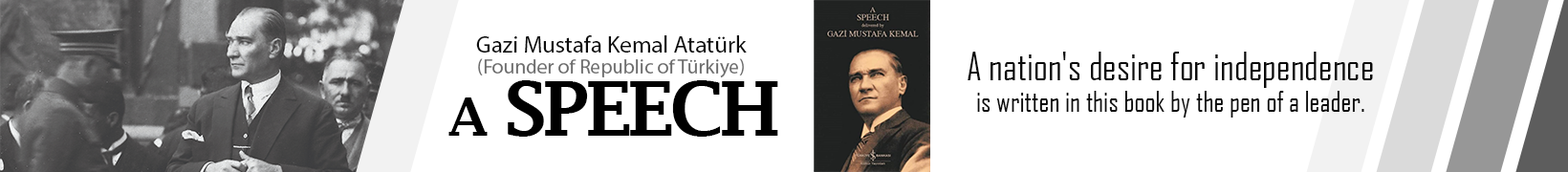
<style>
.page{position:relative;width:1568px;height:172px;background:#ffffff}
.page>*{position:absolute;margin:0}
.t1{font:20.2px/20.2px "MyriadPro-Regular";color:#6e6e6e}
.t2{font:23.6px/20.2px "MyriadPro-Regular";color:#0d0d0d}
.t3{font:27.8px/31.7px "AgencyFB-Reg";color:#0b0b0b}
.t4{font:37.4px/31.7px "AgencyFB-Reg";color:#0b0b0b}
.t5{font:75.1px "LucidaFax-Demi";letter-spacing:-0.06em;color:#000000}
.t6{font:54px "LucidaFax-Demi";letter-spacing:-0.06em;color:#000000}
</style>
<div class="page">
<p class="t1" style="left:476px;top:35px;width:271px;height:43px;text-align:center"><span class="t2">Gazi Mustafa Kemal Atatürk<br></span>(Founder of Republic of Türkiye)</p>
<p class="t3" style="left:968px;top:52px;width:405px;height:66px;text-align:center"><span class="t4">A nation's desire for independence<br></span>is written in this book by the pen of a leader.</p>
<p class="t5" style="left:448px;top:80px;width:330px;height:57px"><span class="t6">A</span> SPEECH</p>
</div>
